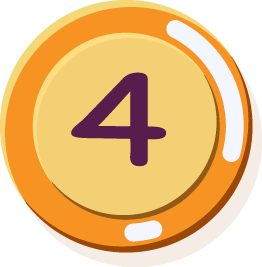
<style>
.page{position:relative;width:262px;height:267px;background:#f4d074}
.page>*{position:absolute;margin:0}
.t1{font:119px "ComicSansMS";color:#581d4d;font-weight:bold;scale:1.41 1}
</style>
<div class="page">
<p class="t1" style="left:71px;top:72px;width:96px;height:95px">4</p>
</div>
